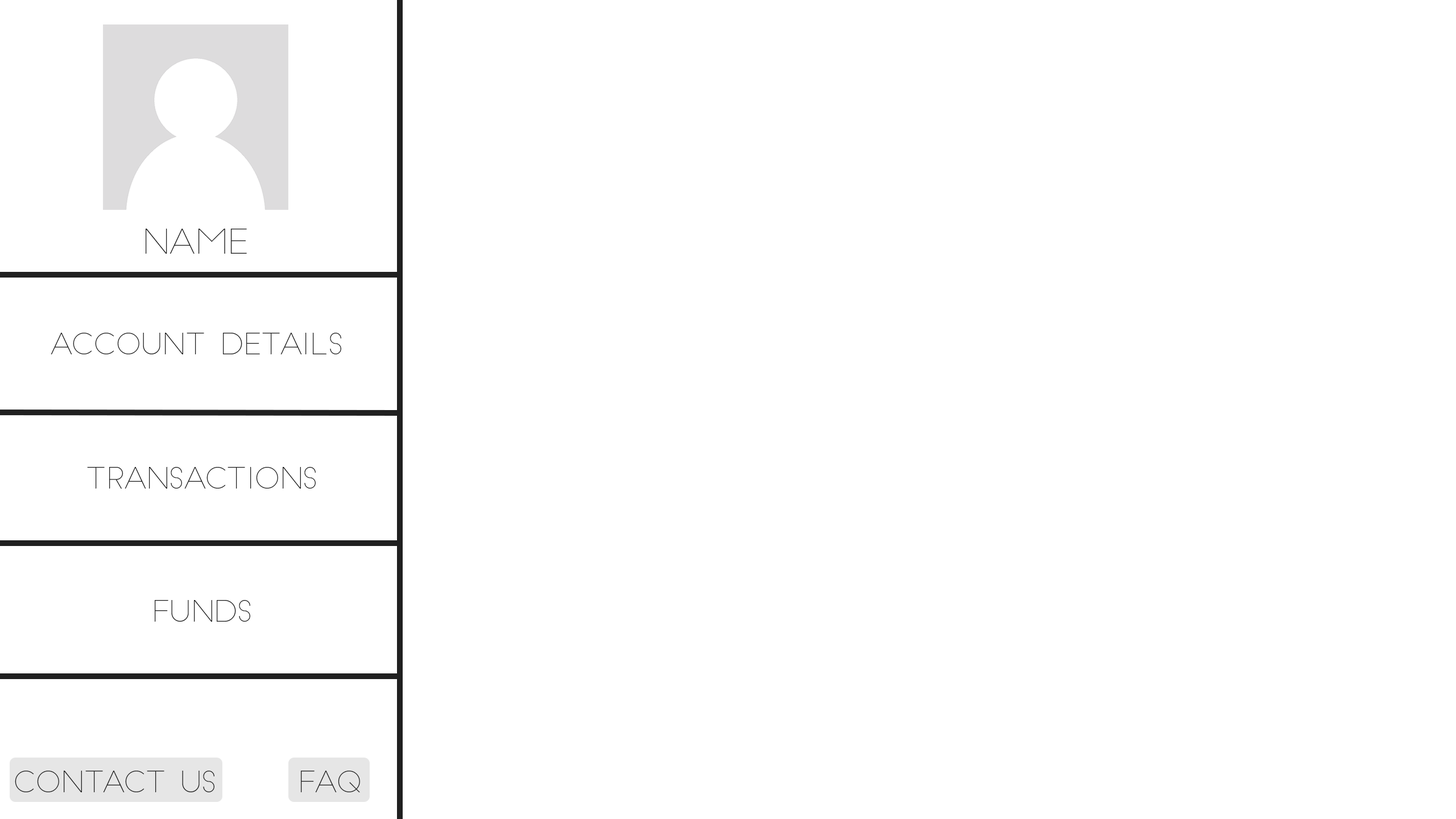
<style>
.page{position:relative;width:1456px;height:819px;background:#ffffff}
.page>*{position:absolute;margin:0}
.t1{font:33.5px "SlimJoe";color:#202020}
.t2{font:28.5px "SlimJoe";color:#202020}
</style>
<div class="page">
<p class="t1" style="left:146px;top:229px;width:101px;height:25px">NAME</p>
<p class="t2" style="left:51px;top:333px;width:290px;height:21px">ACCOUNT DETAILS</p>
<p class="t2" style="left:87px;top:467px;width:229px;height:22px">TRANSACTIONS</p>
<p class="t2" style="left:155px;top:600px;width:95px;height:22px">FUNDS</p>
<p class="t2" style="left:15px;top:771px;width:199px;height:21px">CONTACT US</p>
<p class="t2" style="left:301px;top:771px;width:59px;height:21px">FAQ</p>
</div>
